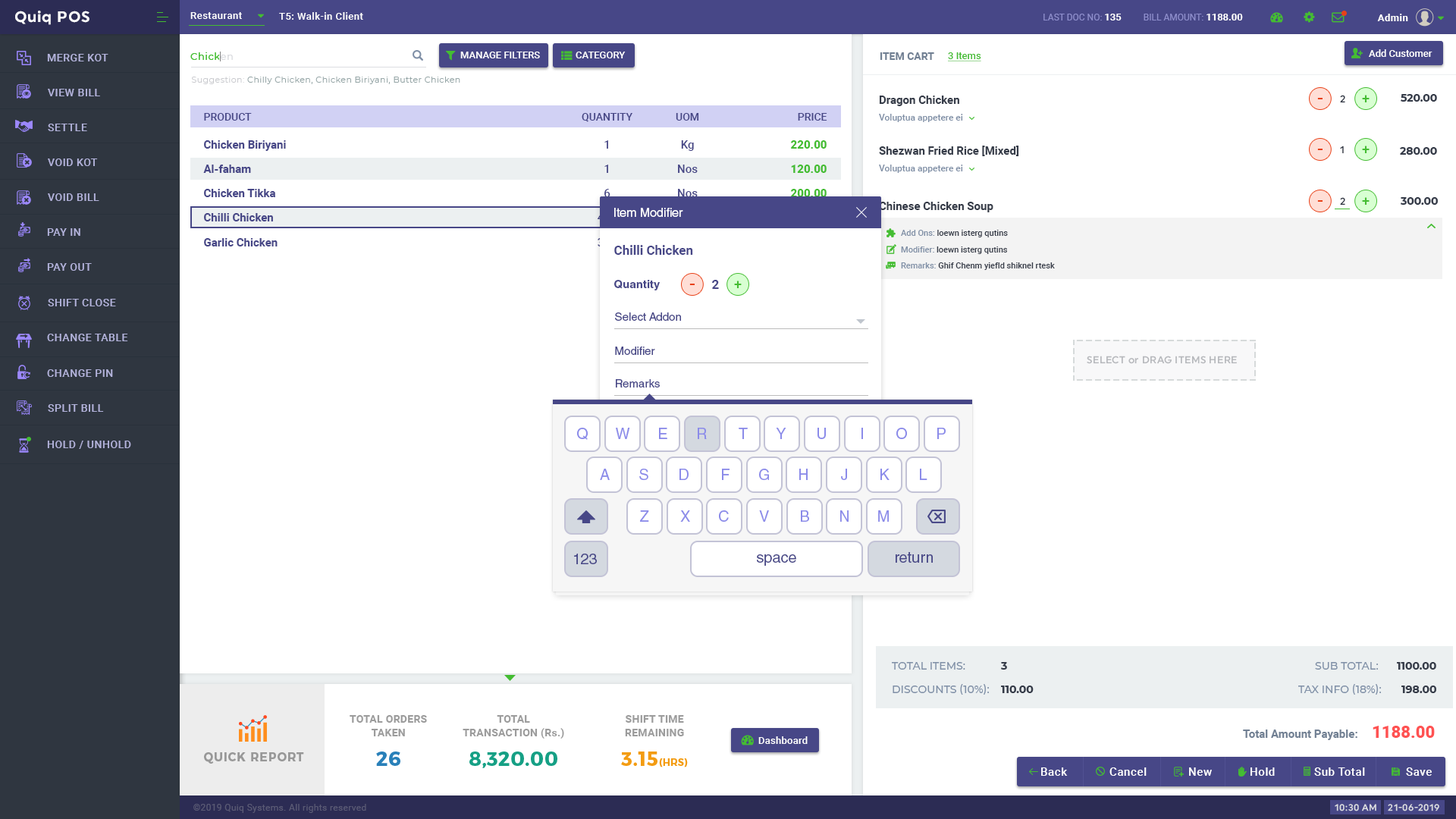
<style>
.page{position:relative;width:1456px;height:819px;background:#ffffff}
.page>*{position:absolute;margin:0}
.t1{font:15.2px "Uniform-Bold";letter-spacing:0.04em;color:#ffffff}
.t2{font:9.9px "Roboto-Medium";letter-spacing:0.04em;color:#ffffff}
.t3{font:9.1px "Roboto-Regular";color:#8e8ecc;text-transform:uppercase}
.t4{font:9.9px "Roboto-Bold";color:#ffffff;text-transform:uppercase}
.t5{font:9.9px "Roboto-Bold";letter-spacing:0.04em;color:#ffffff}
.t6{font:10.6px "Roboto-Medium";letter-spacing:0.04em;color:#b3b3db;text-transform:uppercase}
.t7{font:9.9px "Montserrat-Medium";letter-spacing:0.04em;color:#44bd32}
.t8{font:9.9px "Montserrat-Medium";letter-spacing:0.04em;color:#dcdde1}
.t9{font:9.9px "Roboto-Medium";color:#ffffff;text-transform:uppercase}
.t10{font:10.6px "Roboto-Bold";color:#718093;text-transform:uppercase}
.t11{font:9.9px "Roboto-Medium";color:#44bd32;text-decoration:underline}
.t12{font:9.9px "Roboto-Medium";color:#ffffff}
.t13{font:8.3px "Montserrat-Regular";letter-spacing:0.04em;color:#95a5a6}
.t14{font:8.3px "Montserrat-Regular";letter-spacing:0.04em;color:#cacbcf}
.t15{font:11.4px "Roboto-Bold";color:#353b48}
.t16{font:18.2px "Roboto-Medium";color:#e84118}
.t17{font:9.9px "Uniform-Medium";color:#353b48}
.t18{font:13.6px "Roboto-Medium";color:#44bd32}
.t19{font:10.6px "Montserrat-Bold";color:#353b48}
.t20{font:11.4px/24.4px "Roboto-Bold";color:#474787}
.t21{font:10.6px/27.3px "Roboto-Medium";color:#474787;text-transform:uppercase}
.t22{font:11.4px/28.2px "Roboto-Bold";color:#474787}
.t23{font:11.4px/24.4px "Roboto-Medium";color:#474787}
.t24{font:10.6px/17.4px "Roboto-Medium";color:#474787;text-transform:uppercase}
.t25{font:11.4px/28.2px "Roboto-Medium";color:#474787}
.t26{font:11.4px/24.4px "Roboto-Black";color:#44bd32}
.t27{font:11.4px/28.2px "Roboto-Black";color:#44bd32}
.t28{font:9.1px "Roboto-Medium";color:#7f8fa6}
.t29{font:12.1px "HelveticaLTStd-Roman";color:#ffffff}
.t30{font:8.3px "Roboto-Medium";color:#353b48}
.t31{font:8.3px "Roboto-Medium";color:#7f8fa6}
.t32{font:12.9px "Roboto-Bold";color:#474787}
.t33{font:11.4px "HelveticaLTStd-Bold";color:#474787}
.t34{font:11.4px "HelveticaLTStd-Roman";color:#474787}
.t35{font:9.9px "Uniform-Medium";letter-spacing:0.03em;color:#b7b9bd;text-transform:uppercase}
.t36{font:9.9px "Uniform-Medium";letter-spacing:0.03em;color:#b7b9bd}
.t37{font:15.2px "HelveticaLTStd-Roman";color:#8b8be9}
.t38{font:15.2px "HelveticaLTStd-Roman";color:#474787}
.t39{font:10.6px "Montserrat-Medium";color:#7f8fa6;text-transform:uppercase}
.t40{font:10.6px "Montserrat-Bold";color:#353b48;text-transform:uppercase}
.t41{font:10.6px/13.6px "Roboto-Bold";letter-spacing:0.02em;color:#9c9c9c;text-transform:uppercase}
.t42{font:10.6px/13.6px "Roboto-Bold";letter-spacing:0.02em;color:#9c9c9c}
.t43{font:11.4px "Roboto-Bold";color:#718093}
.t44{font:16.7px "Roboto-Black";color:#ff5252}
.t45{font:9.9px "Roboto-Medium";letter-spacing:0.02em;color:#ffffff}
.t46{font:12.1px "Montserrat-Bold";letter-spacing:0.04em;color:#989898;text-transform:uppercase}
.t47{font:19.7px "Montserrat-Bold";letter-spacing:0.02em;color:#2980b9;text-transform:uppercase}
.t48{font:19.7px "Montserrat-Bold";letter-spacing:0.02em;color:#16a085;text-transform:uppercase}
.t49{font:9.9px "Montserrat-Bold";letter-spacing:0.02em;color:#f39c12;text-transform:uppercase}
.t50{font:19.7px "Montserrat-Bold";letter-spacing:0.02em;color:#f39c12;text-transform:uppercase}
.t51{font:11.4px "Roboto-Medium";letter-spacing:0.04em;color:#ffffff}
.t52{font:9.1px "Roboto-Regular";letter-spacing:0.03em;color:#5a5a75}
.t53{font:9.1px "Uniform-Medium";letter-spacing:0.04em;color:#dcdde1;text-transform:uppercase}
</style>
<div class="page">
<p class="t1" style="left:15px;top:11px;width:74px;height:14px">Quiq POS</p>
<p class="t2" style="left:190px;top:12px;width:52px;height:7px">Restaurant</p>
<p class="t2" style="left:279px;top:12px;width:84px;height:8px">T5: Walk-in Client</p>
<p class="t3" style="left:1043px;top:14px;width:200px;height:6px">Last Doc No: <span class="t4">135         </span>Bill Amount: <span class="t4">1188.00</span></p>
<p class="t5" style="left:1377px;top:14px;width:31px;height:7px">Admin</p>
<p class="t6" style="left:47px;top:54px;width:61px;height:7px">Merge Kot</p>
<p class="t7" style="left:190px;top:52px;width:43px;height:8px">Chick<span class="t8">en</span></p>
<p class="t9" style="left:460px;top:52px;width:80px;height:6px">Manage Filters</p>
<p class="t9" style="left:576px;top:52px;width:50px;height:6px">Category</p>
<p class="t10" style="left:880px;top:52px;width:54px;height:8px">Item Cart</p>
<p class="t11" style="left:948px;top:52px;width:33px;height:9px">3 Items</p>
<p class="t12" style="left:1369px;top:49px;width:63px;height:8px">Add Customer</p>
<p class="t13" style="left:191px;top:77px;width:269px;height:7px"><span class="t14">Suggestion: </span>Chilly Chicken, Chicken Biriyani, Butter Chicken</p>
<p class="t6" style="left:48px;top:89px;width:52px;height:7px">View Bill</p>
<p class="t15" style="left:879px;top:96px;width:80px;height:10px">Dragon Chicken</p>
<p class="t16" style="left:1317px;top:98px;width:6px;height:1px">-</p>
<p class="t17" style="left:1340px;top:95px;width:5px;height:8px">2</p>
<p class="t18" style="left:1362px;top:95px;width:8px;height:7px">+</p>
<p class="t19" style="left:1401px;top:94px;width:36px;height:8px">520.00</p>
<p class="t20" style="left:203px;top:113px;width:83px;height:133px"><span class="t21">Product<br></span><span class="t22">Chicken Biriyani<br></span>Al-faham<br>Chicken Tikka<br>Chilli Chicken<br>Garlic Chicken</p>
<p class="t23" style="left:676px;top:113px;width:23px;height:133px;text-align:center"><span class="t24">UOM<br></span><span class="t25">Kg<br></span>Nos<br>Nos<br>Gms<br>Gms</p>
<p class="t26" style="left:790px;top:113px;width:37px;height:133px;text-align:right"><span class="t24">Price<br></span><span class="t27">220.00<br></span>120.00<br>200.00<br>240.00<br>230.00</p>
<p class="t28" style="left:879px;top:114px;width:84px;height:8px">Voluptua appetere ei</p>
<p class="t6" style="left:48px;top:124px;width:39px;height:7px">Settle</p>
<p class="t15" style="left:879px;top:146px;width:140px;height:10px">Shezwan Fried Rice [Mixed]</p>
<p class="t16" style="left:1317px;top:149px;width:6px;height:1px">-</p>
<p class="t17" style="left:1340px;top:146px;width:4px;height:8px">1</p>
<p class="t18" style="left:1362px;top:146px;width:8px;height:7px">+</p>
<p class="t19" style="left:1400px;top:147px;width:37px;height:8px">280.00</p>
<p class="t6" style="left:48px;top:158px;width:50px;height:8px">Void Kot</p>
<p class="t28" style="left:879px;top:165px;width:84px;height:8px">Voluptua appetere ei</p>
<p class="t6" style="left:48px;top:193px;width:51px;height:8px">Void Bill</p>
<p class="t17" style="left:1340px;top:197px;width:5px;height:9px">2</p>
<p class="t18" style="left:1362px;top:197px;width:8px;height:8px">+</p>
<p class="t19" style="left:1401px;top:197px;width:37px;height:8px">300.00</p>
<p class="t29" style="left:614px;top:208px;width:69px;height:9px">Item Modifier</p>
<p class="t15" style="left:879px;top:202px;width:114px;height:10px">Chinese Chicken Soup</p>
<p class="t16" style="left:1317px;top:200px;width:6px;height:2px">-</p>
<p class="t6" style="left:47px;top:228px;width:33px;height:8px">Pay In</p>
<p class="t30" style="left:901px;top:230px;width:107px;height:7px"><span class="t31">Add Ons: </span>loewn isterg qutins</p>
<p class="t32" style="left:614px;top:245px;width:79px;height:10px">Chilli Chicken</p>
<p class="t30" style="left:901px;top:246px;width:106px;height:8px"><span class="t31">Modifier: </span>loewn isterg qutins</p>
<p class="t6" style="left:47px;top:263px;width:45px;height:8px">Pay out</p>
<p class="t30" style="left:901px;top:262px;width:154px;height:8px"><span class="t31">Remarks: </span>Ghif Chenm yiefld shiknel rtesk</p>
<p class="t33" style="left:614px;top:280px;width:46px;height:10px">Quantity</p>
<p class="t32" style="left:712px;top:280px;width:7px;height:9px">2</p>
<p class="t18" style="left:734px;top:281px;width:8px;height:7px">+</p>
<p class="t16" style="left:689px;top:284px;width:6px;height:1px">-</p>
<p class="t6" style="left:48px;top:299px;width:68px;height:7px">Shift Close</p>
<p class="t34" style="left:615px;top:312px;width:66px;height:9px">Select Addon</p>
<p class="t6" style="left:47px;top:334px;width:81px;height:7px">Change Table</p>
<p class="t34" style="left:615px;top:347px;width:40px;height:8px">Modifier</p>
<p class="t35" style="left:1087px;top:356px;width:150px;height:8px">Select <span class="t36">or</span> Drag Items Here</p>
<p class="t6" style="left:47px;top:369px;width:66px;height:8px">Change Pin</p>
<p class="t34" style="left:616px;top:379px;width:44px;height:9px">Remarks</p>
<p class="t6" style="left:48px;top:404px;width:56px;height:8px">Split Bill</p>
<p class="t37" style="left:577px;top:428px;width:11px;height:12px">Q</p>
<p class="t37" style="left:616px;top:428px;width:14px;height:11px">W</p>
<p class="t37" style="left:659px;top:428px;width:8px;height:11px">E</p>
<p class="t37" style="left:698px;top:428px;width:9px;height:11px">R</p>
<p class="t37" style="left:739px;top:428px;width:9px;height:11px">T</p>
<p class="t37" style="left:776px;top:428px;width:10px;height:11px">Y</p>
<p class="t37" style="left:817px;top:428px;width:9px;height:11px">U</p>
<p class="t37" style="left:896px;top:428px;width:11px;height:11px">O</p>
<p class="t37" style="left:937px;top:428px;width:9px;height:11px">P</p>
<p class="t6" style="left:47px;top:441px;width:84px;height:8px">Hold / Unhold</p>
<p class="t37" style="left:600px;top:469px;width:10px;height:11px">A</p>
<p class="t37" style="left:639px;top:469px;width:9px;height:11px">S</p>
<p class="t37" style="left:679px;top:469px;width:10px;height:11px">D</p>
<p class="t37" style="left:722px;top:469px;width:8px;height:11px">F</p>
<p class="t37" style="left:759px;top:469px;width:10px;height:11px">G</p>
<p class="t37" style="left:799px;top:469px;width:9px;height:11px">H</p>
<p class="t37" style="left:841px;top:469px;width:6px;height:11px">J</p>
<p class="t37" style="left:880px;top:469px;width:10px;height:11px">K</p>
<p class="t37" style="left:920px;top:469px;width:7px;height:11px">L</p>
<p class="t37" style="left:640px;top:510px;width:9px;height:12px">Z</p>
<p class="t37" style="left:680px;top:510px;width:10px;height:12px">X</p>
<p class="t37" style="left:719px;top:510px;width:10px;height:12px">C</p>
<p class="t37" style="left:759px;top:510px;width:10px;height:12px">V</p>
<p class="t37" style="left:801px;top:510px;width:8px;height:12px">B</p>
<p class="t37" style="left:840px;top:510px;width:9px;height:12px">N</p>
<p class="t37" style="left:878px;top:510px;width:11px;height:12px">M</p>
<p class="t38" style="left:574px;top:554px;width:23px;height:10px">123</p>
<p class="t38" style="left:757px;top:554px;width:39px;height:12px">space</p>
<p class="t38" style="left:896px;top:552px;width:37px;height:11px">return</p>
<p class="t39" style="left:892px;top:662px;width:115px;height:8px">Total Items:  <span class="t40">3</span></p>
<p class="t39" style="left:1315px;top:662px;width:121px;height:8px">Sub Total: <span class="t40">1100.00</span></p>
<p class="t39" style="left:893px;top:684px;width:141px;height:11px">Discounts (10%): <span class="t40">110.00</span></p>
<p class="t39" style="left:1298px;top:684px;width:138px;height:11px">Tax Info (18%):       <span class="t40">198.00</span></p>
<p class="t41" style="left:350px;top:715px;width:77px;height:21px;text-align:center">Total Orders<br>Taken</p>
<p class="t41" style="left:463px;top:715px;width:101px;height:24px;text-align:center">Total<br>Transaction (R<span class="t42">s.</span>)</p>
<p class="t41" style="left:625px;top:715px;width:59px;height:21px;text-align:center">Shift Time<br>Remaining</p>
<p class="t43" style="left:1243px;top:726px;width:192px;height:14px">Total Amount Payable:    <span class="t44">1188.00</span></p>
<p class="t45" style="left:758px;top:736px;width:50px;height:8px">Dashboard</p>
<p class="t46" style="left:204px;top:752px;width:100px;height:12px">Quick Report</p>
<p class="t47" style="left:376px;top:751px;width:24px;height:15px">26</p>
<p class="t48" style="left:469px;top:751px;width:88px;height:17px">8,320.00</p>
<p class="t49" style="left:621px;top:751px;width:67px;height:16px"><span class="t50">3.15</span>(Hrs)</p>
<p class="t51" style="left:1041px;top:767px;width:27px;height:9px">Back</p>
<p class="t51" style="left:1109px;top:767px;width:38px;height:9px">Cancel</p>
<p class="t51" style="left:1189px;top:767px;width:23px;height:9px">New</p>
<p class="t51" style="left:1250px;top:767px;width:25px;height:9px">Hold</p>
<p class="t51" style="left:1314px;top:767px;width:51px;height:9px">Sub Total</p>
<p class="t51" style="left:1406px;top:767px;width:26px;height:9px">Save</p>
<p class="t52" style="left:193px;top:804px;width:173px;height:9px">©2019 Quiq Systems. All rights reserved</p>
<p class="t53" style="left:1335px;top:804px;width:41px;height:7px">10:30 am</p>
<p class="t53" style="left:1388px;top:804px;width:51px;height:7px">21-06-2019</p>
</div>
